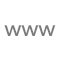
<style>
.page{position:relative;width:60px;height:60px;background:#ffffff}
.page>*{position:absolute;margin:0}
.t1{font:22.6px "Avenir-Medium";color:#7b7b7b}
</style>
<div class="page">
<p class="t1" style="left:4px;top:25px;width:52px;height:11px">www</p>
</div>
